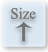
<style>
.page{position:relative;width:48px;height:52px}
.page>*{position:absolute;margin:0}
.t1{font:15.6px "TimesNewRomanPSMT";color:#6d7379;scale:0.95 1}
</style>
<div class="page">
<p class="t1" style="left:11px;top:7px;width:25px;height:12px">Size</p>
</div>
